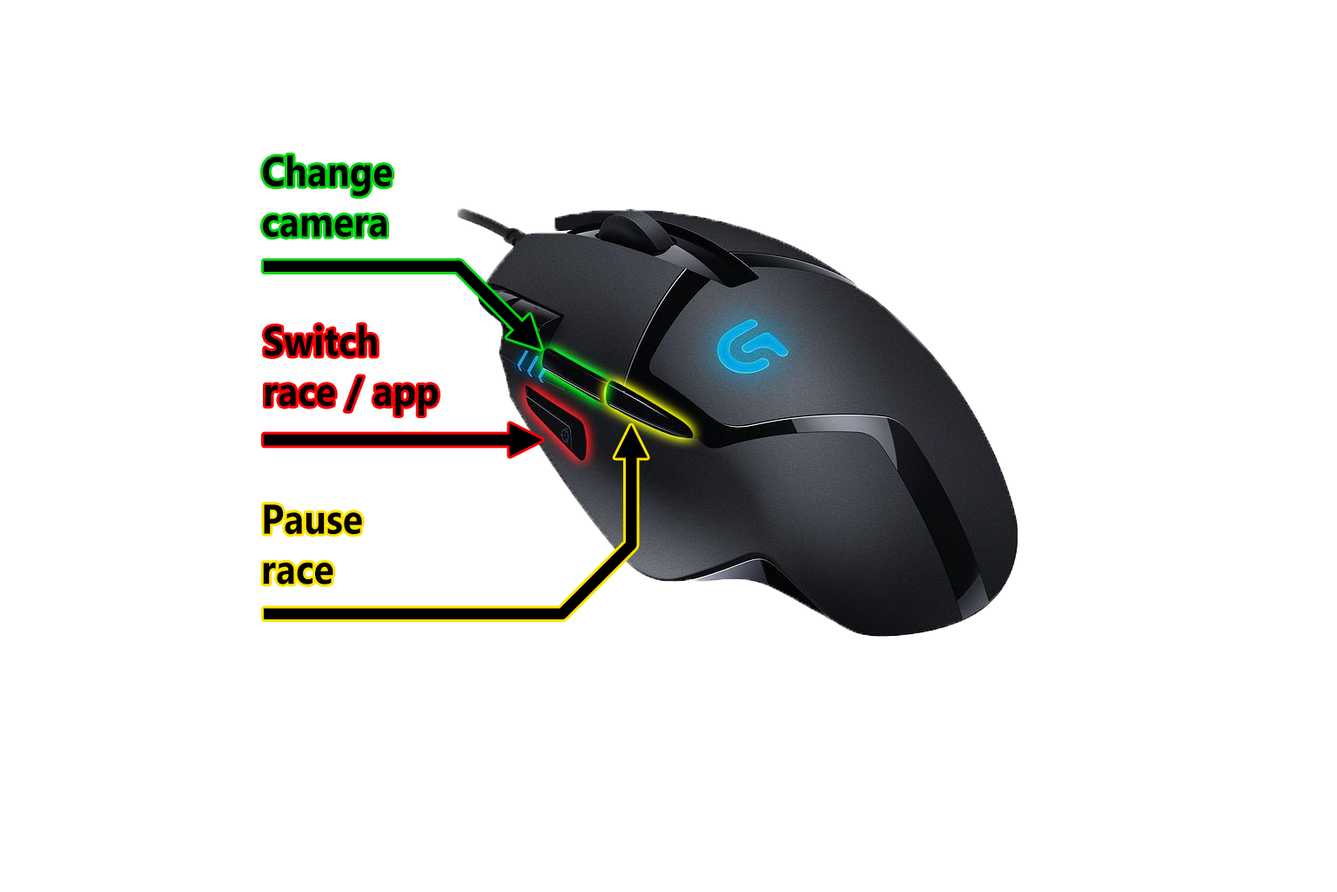
<style>
.page{position:relative;width:1337px;height:892px;background:#ffffff}
.page>*{position:absolute;margin:0}
.t1{font:41.8px "Gadugi-Bold";color:#000000;scale:0.89 1}
</style>
<div class="page">
<p class="t1" style="left:263px;top:155px;width:130px;height:82px">Change<br>camera</p>
<p class="t1" style="left:265px;top:325px;width:173px;height:90px">Switch<br>race / app</p>
<p class="t1" style="left:263px;top:504px;width:99px;height:80px">Pause<br>race</p>
</div>
